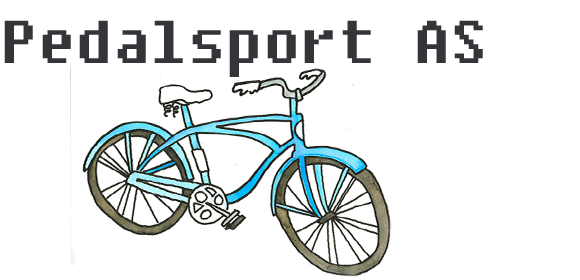
<style>
.page{position:relative;width:580px;height:280px;background:#ffffff}
.page>*{position:absolute;margin:0}
.t1{font:60px "Fixedsys";color:#333539}
</style>
<div class="page">
<p class="t1" style="left:4px;top:20px;width:479px;height:57px">Pedalsport AS</p>
</div>
